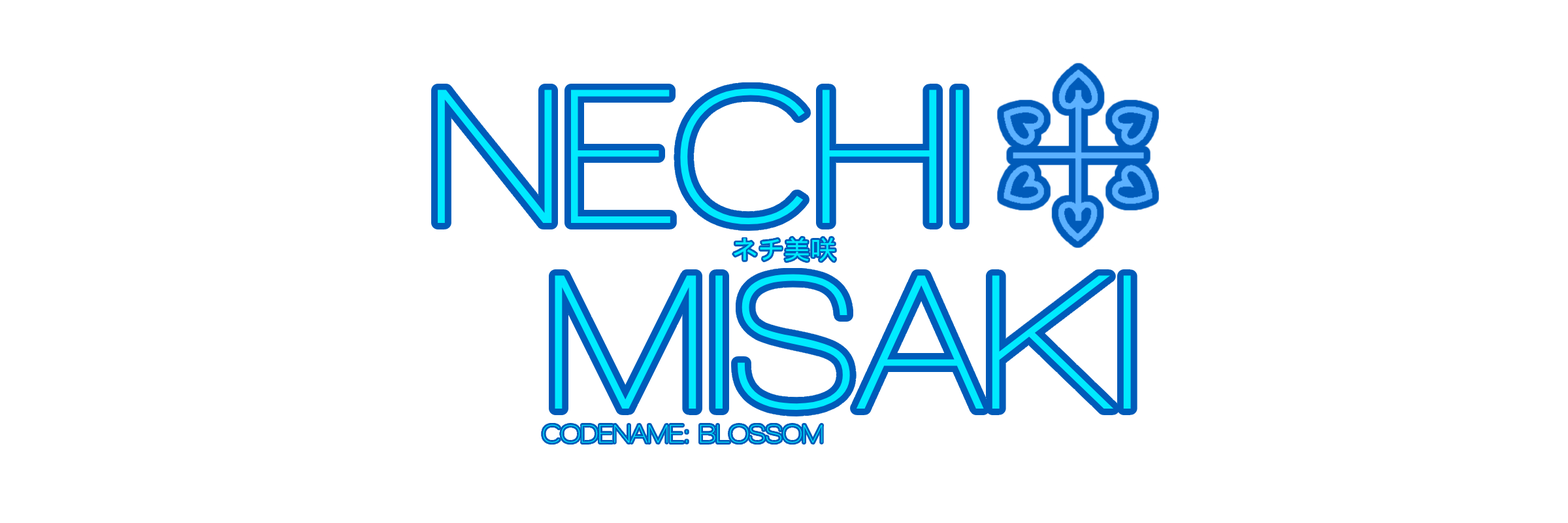
<style>
.page{position:relative;width:1568px;height:523px;background:#ffffff}
.page>*{position:absolute;margin:0}
.t1{font:196px "WalkwaySemiBold";color:#00eaff}
.t2{font:26.1px "DroidSansFallback";color:#00eaff}
.t3{font:26.1px "WalkwaySemiBold";color:#00eaff}
</style>
<div class="page">
<p class="t1" style="left:438px;top:88px;width:525px;height:137px">NECHI</p>
<p class="t2" style="left:733px;top:237px;width:103px;height:24px">ネチ美咲</p>
<p class="t1" style="left:555px;top:274px;width:576px;height:136px">MISAKI</p>
<p class="t3" style="left:543px;top:424px;width:280px;height:19px">CODENAME: BLOSSOM</p>
</div>
